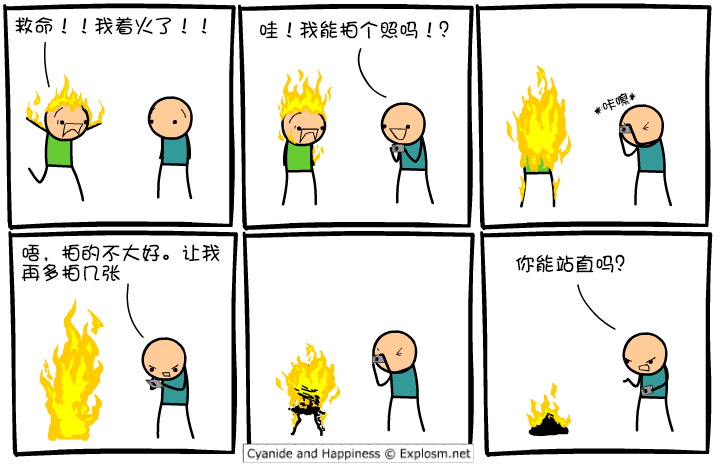
<style>
.page{position:relative;width:720px;height:470px;background:#ffffff}
.page>*{position:absolute;margin:0}
.t1{font:20px "DFShaoNvW5";color:#000000}
.t2{font:14px "DFShaoNvW5";color:#000000}
.t3{font:20px/20px "DFShaoNvW5";color:#000000}
</style>
<div class="page">
<p class="t1" style="left:15px;top:16px;width:192px;height:19px">救命！！我着火了！！</p>
<p class="t1" style="left:260px;top:20px;width:189px;height:19px">哇！我能拍个照吗！？</p>
<p class="t2" style="left:602px;top:93px;width:28px;height:18px;rotate:-20deg">咔嚓</p>
<p class="t3" style="left:21px;top:244px;width:199px;height:38px">唔，拍的不大好。让我<br>再多拍几张</p>
<p class="t1" style="left:516px;top:254px;width:109px;height:19px">你能站直吗？</p>
</div>
